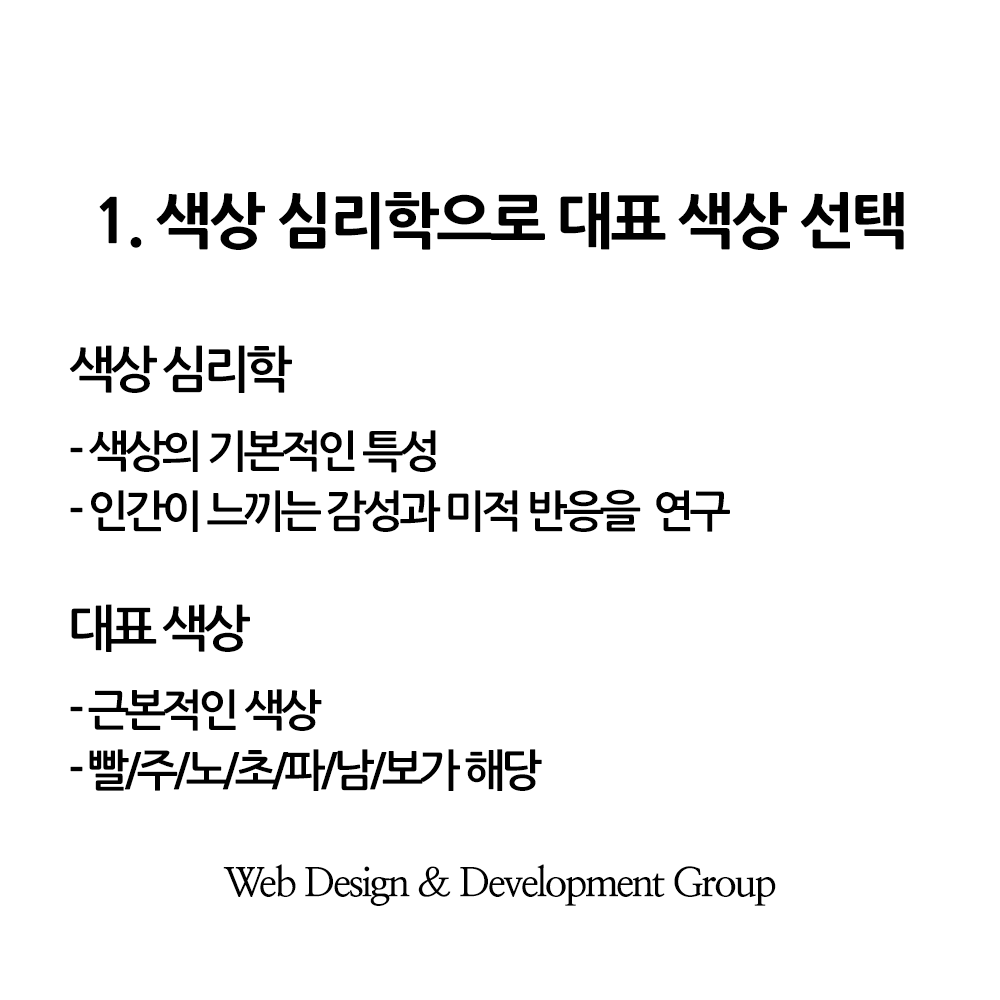
<style>
.page{position:relative;width:1000px;height:1000px;background:#ffffff}
.page>*{position:absolute;margin:0}
.t1{font:60px "NanumGothicExtraBold";letter-spacing:-0.05em;color:#000000}
.t2{font:44px/60px "NanumGothicBold";letter-spacing:-0.1em;color:#000000}
.t3{font:50px/100px "NanumGothicBold";letter-spacing:-0.1em;color:#000000}
.t4{font:44px/80px "NanumGothicBold";letter-spacing:-0.1em;color:#000000}
.t5{font:40px "NanumMyeongjoBold";letter-spacing:-0.06em;color:#000000}
</style>
<div class="page">
<p class="t1" style="left:99px;top:192px;width:805px;height:58px">1. 색상 심리학으로 대표 색상 선택</p>
<p class="t2" style="left:69px;top:345px;width:661px;height:187px"><span class="t3">색상 심리학<br></span><span class="t4">- 색상의 기본적인 특성<br></span>- 인간이 느끼는 감성과 미적 반응을  연구</p>
<p class="t2" style="left:70px;top:604px;width:472px;height:187px"><span class="t3">대표 색상<br></span><span class="t4">- 근본적인 색상<br></span>- 빨/주/노/초/파/남/보가 해당</p>
<p class="t5" style="left:223px;top:864px;width:553px;height:42px">Web Design &amp; Development Group</p>
</div>
